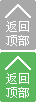
<style>
.page{position:relative;width:36px;height:102px;background:#a8a8a8}
.page>*{position:absolute;margin:0}
.t1{font:12px "SimSun";color:#ffffff}
</style>
<div class="page">
<p class="t1" style="left:6px;top:21px;width:23px;height:25px;text-align:center">返回<br>顶部</p>
<p class="t1" style="left:6px;top:73px;width:23px;height:25px;text-align:center">返回<br>顶部</p>
</div>
